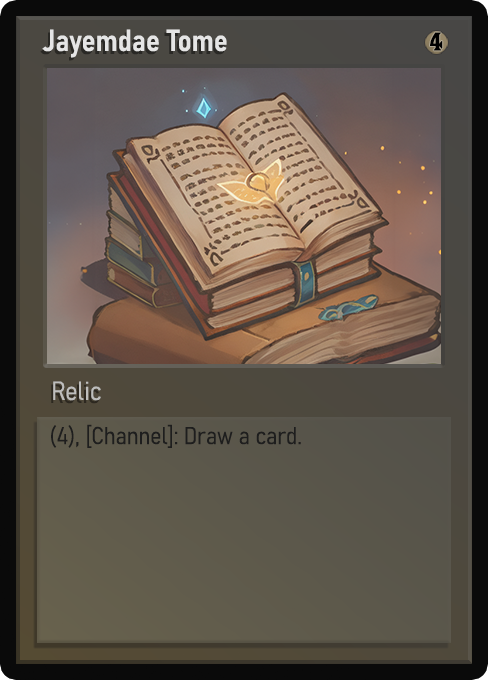
<style>
.page{position:relative;width:488px;height:680px}
.page>*{position:absolute;margin:0}
.t1{font:30px "Bahnschrift-SemiBoldSemiCondensed";color:#f2f2f2;font-weight:bold}
.t2{font:25px "WTRRoycroft";color:#000000;font-weight:bold;scale:1.09 1}
.t3{font:26px "Bahnschrift-LightSemiCondensed";color:#c8c8c8;font-weight:bold}
.t4{font:24px "Bahnschrift-LightSemiCondensed";color:#1e1e1e;font-weight:bold}
</style>
<div class="page">
<p class="t1" style="left:42px;top:29px;width:185px;height:29px;opacity:0.9">Jayemdae Tome</p>
<p class="t2" style="left:430px;top:32px;width:13px;height:19px">4</p>
<p class="t3" style="left:53px;top:381px;width:48px;height:20px;opacity:0.9">Relic</p>
<p class="t4" style="left:51px;top:424px;width:250px;height:24px">(4), [Channel]: Draw a card.</p>
</div>
